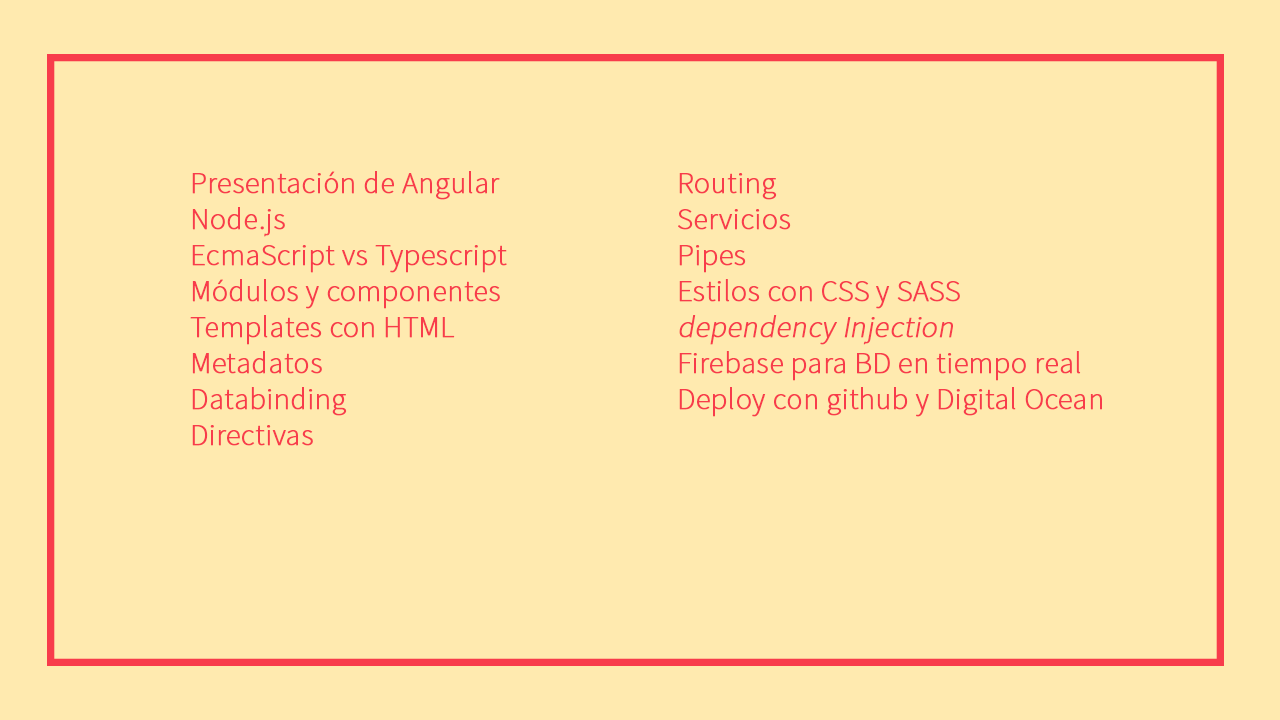
<style>
.page{position:relative;width:1280px;height:720px;background:#ffeaaf}
.page>*{position:absolute;margin:0}
.t1{font:30px "SourceSansPro-ExtraLight";color:#f83c4b;font-weight:bold}
.t2{font:30px "SourceSansPro-ExtraLight";color:#f83c4b;font-weight:bold;font-style:italic}
</style>
<div class="page">
<p class="t1" style="left:190px;top:171px;width:317px;height:275px">Presentación de Angular<br>Node.js<br>EcmaScript vs Typescript<br>Módulos y componentes<br>Templates con HTML<br>Metadatos<br>Databinding <br>Directivas</p>
<p class="t1" style="left:678px;top:173px;width:424px;height:244px">Routing<br>Servicios<br>Pipes<br>Estilos con CSS y SASS<br><span class="t2">dependency Injection<br></span>Firebase para BD en tiempo real<br>Deploy con github y Digital Ocean</p>
</div>
